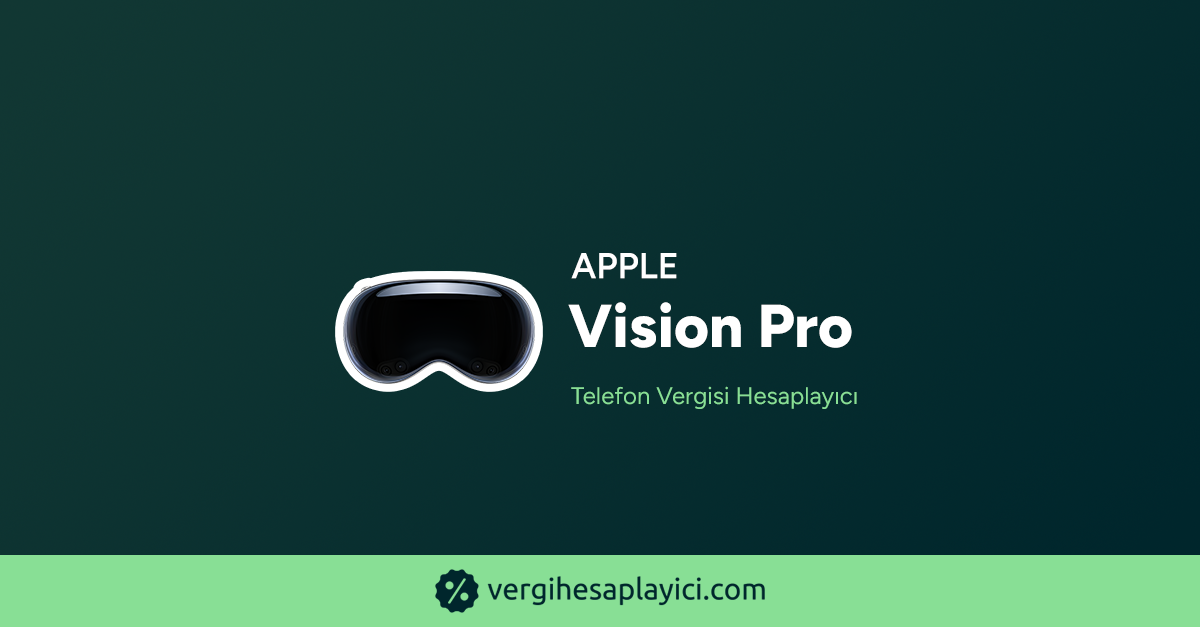
<style>
.page{position:relative;width:1200px;height:627px}
.page>*{position:absolute;margin:0}
.t1{font:36px "Figtree-SemiBold";color:#ffffff;text-transform:uppercase;font-weight:bold}
.t2{font:60.3px "Figtree-ExtraBold";color:#ffffff;font-weight:bold}
.t3{font:24px "Figtree-Regular";color:#88df95;font-weight:bold}
</style>
<div class="page">
<p class="t1" style="left:571px;top:253px;width:106px;height:26px">Apple</p>
<p class="t2" style="left:568px;top:302px;width:284px;height:46px">Vision Pro</p>
<p class="t3" style="left:571px;top:386px;width:286px;height:23px">Telefon Vergisi Hesaplayıcı</p>
</div>
